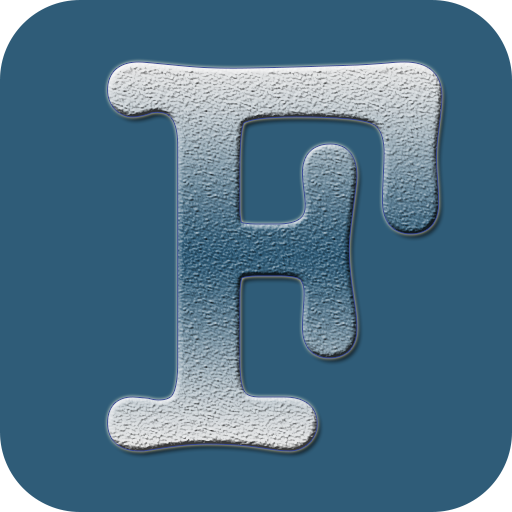
<style>
.page{position:relative;width:512px;height:512px;background:#2f5c78}
.page>*{position:absolute;margin:0}
.t1{font:552px "AmericanTypewriter";font-weight:bold}
</style>
<div class="page">
<p class="t1" style="left:108px;top:62px;width:334px;height:389px">F</p>
</div>
